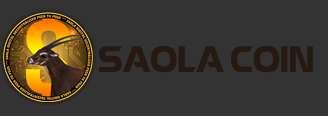
<style>
.page{position:relative;width:328px;height:116px;background:#333333}
.page>*{position:absolute;margin:0}
.t1{font:36px "UTM-Eremitage";color:#261912}
</style>
<div class="page">
<p class="t1" style="left:98px;top:46px;width:215px;height:27px">SAOLA COIN</p>
</div>
